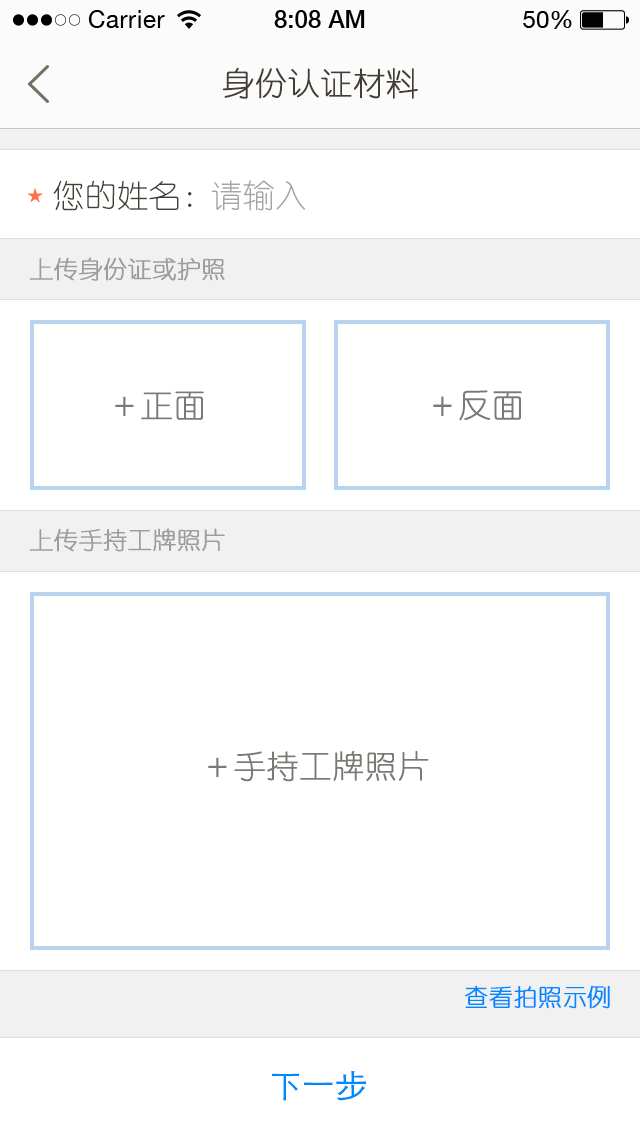
<style>
.page{position:relative;width:640px;height:1136px;background:#ffffff}
.page>*{position:absolute;margin:0}
.t1{font:32px "YouYuan";color:#433d33;text-transform:uppercase;font-weight:bold}
.t2{font:32px "YouYuan";color:#433e34;text-transform:uppercase}
.t3{font:32px "YouYuan";color:#a7a6a3;text-transform:uppercase}
.t4{font:24px "YouYuan";color:#9e9c99;text-transform:uppercase;font-weight:bold}
.t5{font:32px "YouYuan";color:#7b7973;text-transform:uppercase;font-weight:bold}
.t6{font:24px "YouYuan";color:#0088ff;text-transform:uppercase;font-weight:bold}
.t7{font:32px "STHeitiSC-Light";color:#0088ff;text-transform:uppercase;font-weight:bold}
</style>
<div class="page">
<p class="t1" style="left:222px;top:67px;width:196px;height:32px">身份认证材料</p>
<p class="t2" style="left:53px;top:180px;width:139px;height:31px">您的姓名：</p>
<p class="t3" style="left:211px;top:180px;width:94px;height:31px">请输入</p>
<p class="t4" style="left:29px;top:257px;width:196px;height:24px">上传身份证或护照</p>
<p class="t5" style="left:433px;top:390px;width:89px;height:31px">＋反面</p>
<p class="t5" style="left:115px;top:391px;width:89px;height:29px">＋正面</p>
<p class="t4" style="left:29px;top:528px;width:196px;height:24px">上传手持工牌照片</p>
<p class="t5" style="left:208px;top:750px;width:221px;height:32px">＋手持工牌照片</p>
<p class="t6" style="left:465px;top:985px;width:145px;height:24px">查看拍照示例</p>
<p class="t7" style="left:272px;top:1071px;width:94px;height:30px">下一步</p>
</div>
